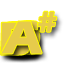
<style>
.page{position:relative;width:64px;height:64px;background:#ffffff}
.page>*{position:absolute;margin:0}
.t1{font:48px "ErasITC-Bold";color:#e6cb4b}
</style>
<div class="page">
<p class="t1" style="left:1px;top:21px;width:41px;height:33px">A</p>
</div>
